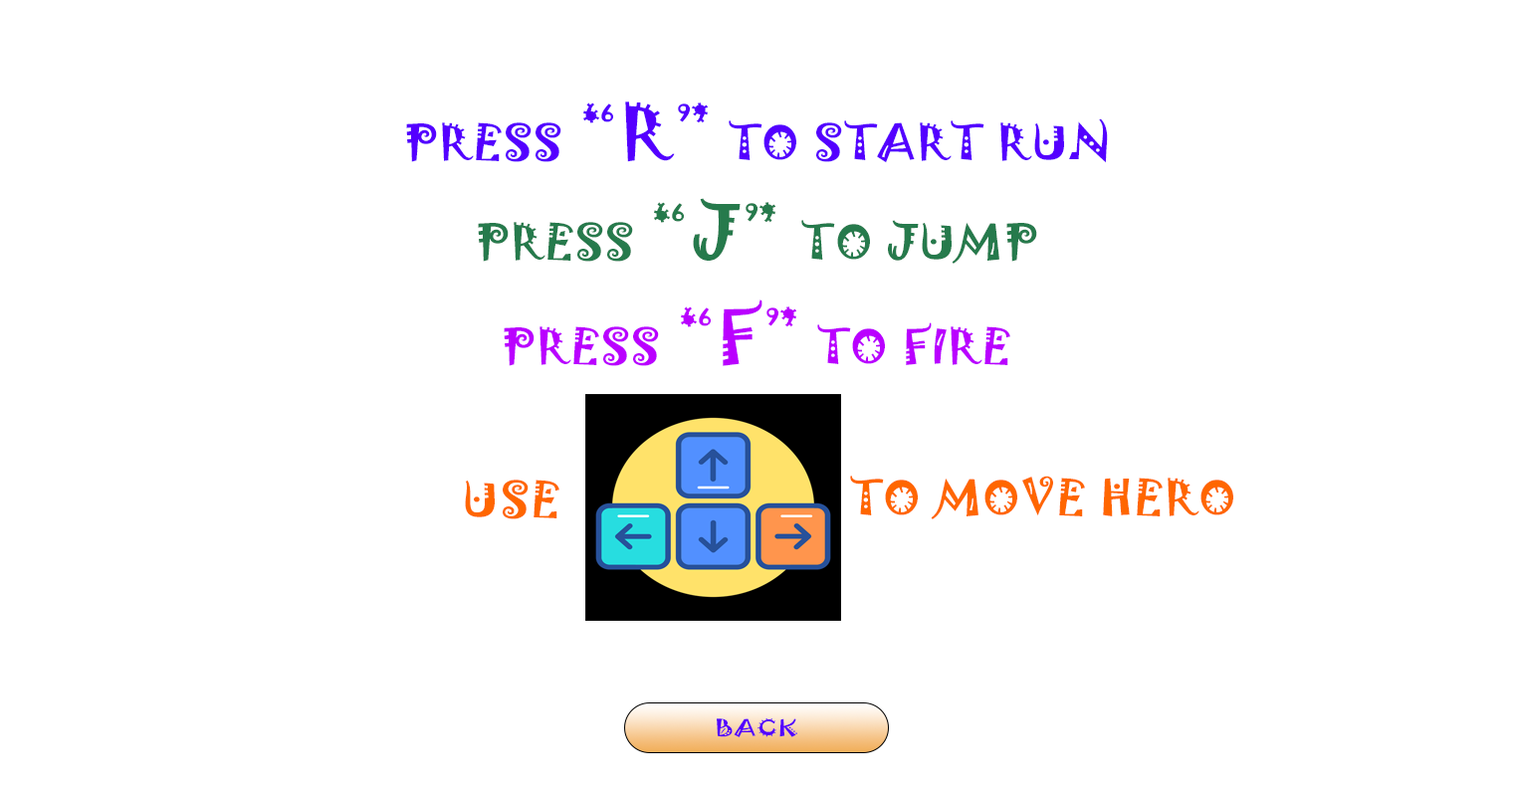
<style>
.page{position:relative;width:1513px;height:788px;background:#ffffff}
.page>*{position:absolute;margin:0}
.t1{font:44.1px "Jokerman-Regular";letter-spacing:0.03em;color:#5400ff;scale:1.1 1}
.t2{font:68.7px "Jokerman-Regular";letter-spacing:0.03em;color:#5400ff;scale:1.1 1}
.t3{font:44.1px "Jokerman-Regular";letter-spacing:0.03em;color:#267a4c;scale:1.1 1}
.t4{font:68.7px "Jokerman-Regular";letter-spacing:0.03em;color:#267a4c;scale:1.1 1}
.t5{font:44.1px "Jokerman-Regular";letter-spacing:0.03em;color:#ba00ff;scale:1.1 1}
.t6{font:68.7px "Jokerman-Regular";letter-spacing:0.03em;color:#ba00ff;scale:1.1 1}
.t7{font:44.1px "Jokerman-Regular";letter-spacing:0.03em;color:#ff6600;scale:1.1 1}
.t8{font:20.7px "Jokerman-Regular";letter-spacing:0.03em;color:#5400ff;scale:1.32 1}
</style>
<div class="page">
<p class="t1" style="left:406px;top:102px;width:702px;height:61px">PRESS <span class="t2">“R”</span> TO START RUN</p>
<p class="t3" style="left:478px;top:198px;width:559px;height:66px">PRESS <span class="t4">“J” </span>TO JUMP</p>
<p class="t5" style="left:504px;top:300px;width:506px;height:66px">PRESS <span class="t6">“F”</span> TO FIRE</p>
<p class="t7" style="left:465px;top:480px;width:94px;height:40px">USE</p>
<p class="t7" style="left:850px;top:476px;width:383px;height:44px">TO MOVE HERO</p>
<p class="t8" style="left:717px;top:719px;width:80px;height:18px">BACK</p>
</div>
